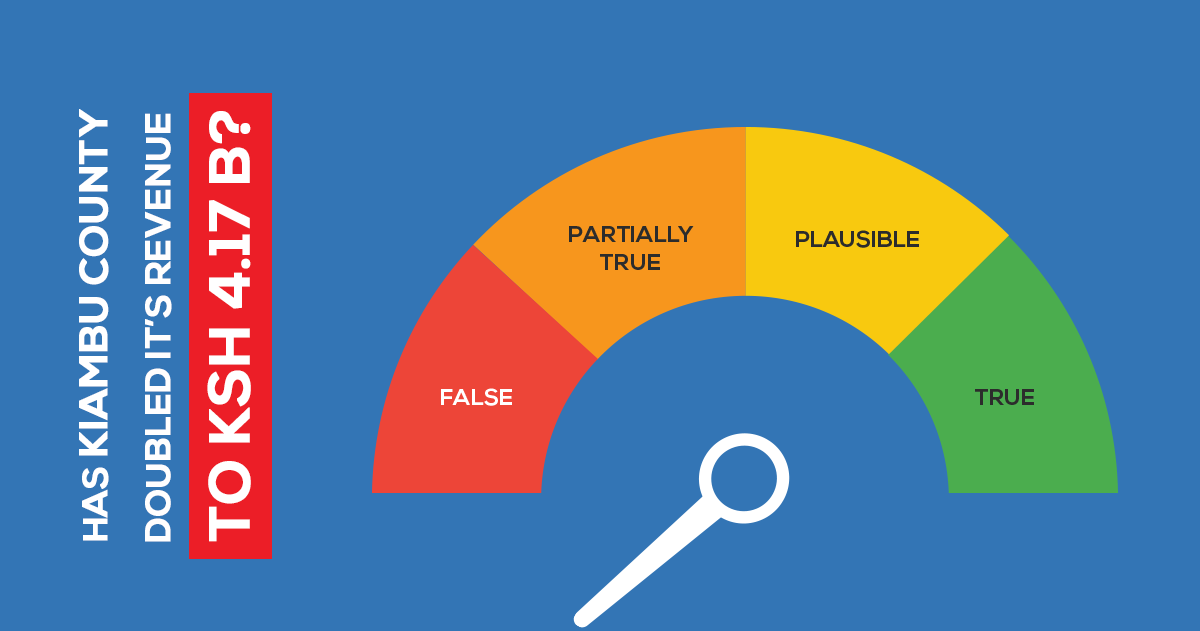
<style>
.page{position:relative;width:1200px;height:631px;background:#3375b5}
.page>*{position:absolute;margin:0}
.t1{font:39.6px "NexaBold";color:#ffffff;text-transform:uppercase;font-weight:bold}
.t2{font:35px "NexaBold";color:#ffffff;text-transform:uppercase;font-weight:bold}
.t3{font:35px "NexaBold";color:#fffefe;text-transform:uppercase;font-weight:bold}
.t4{font:57.1px "NexaBold";color:#ffffff;text-transform:uppercase;font-weight:bold}
</style>
<div class="page">
<p class="t1" style="left:79px;top:109px;width:30px;height:432px;rotate:-90deg"><span class="t2">has </span>kiambu county</p>
<p class="t3" style="left:145px;top:113px;width:27px;height:429px;rotate:-90deg">doubled it’s revenue</p>
<p class="t4" style="left:207px;top:111px;width:44px;height:431px;rotate:-90deg">to KSH 4.17 B?</p>
</div>
